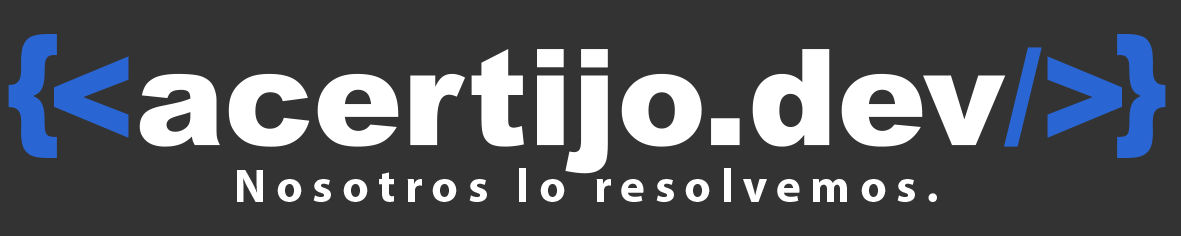
<style>
.page{position:relative;width:1181px;height:236px;background:#333333}
.page>*{position:absolute;margin:0}
.t1{font:133.6px "Arial-Black";color:#ffffff}
.t2{font:133.6px "Arial-Black";color:#2965d3}
.t3{font:46.8px "MyriadPro-Bold";letter-spacing:0.2em;color:#ffffff}
</style>
<div class="page">
<p class="t1" style="left:54px;top:47px;width:1068px;height:127px"><span class="t2">&lt;</span>acertijo.dev<span class="t2">/&gt;</span></p>
<p class="t3" style="left:237px;top:168px;width:700px;height:34px">Nosotros lo resolvemos.</p>
</div>
